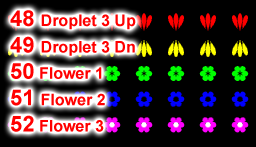
<style>
.page{position:relative;width:256px;height:147px;background:#000000}
.page>*{position:absolute;margin:0}
.t1{font:16px "Arial-BoldMT";color:#ff0000}
.t2{font:22px "Arial-BoldMT";color:#ff0000}
</style>
<div class="page">
<p class="t1" style="left:10px;top:10px;width:126px;height:122px"><span class="t2">48 </span>Droplet 3 Up<br><span class="t2">49 </span>Droplet 3 Dn<br><span class="t2">50</span> Flower 1<br><span class="t2">51 </span>Flower 2<br><span class="t2">52</span> Flower 3</p>
</div>
